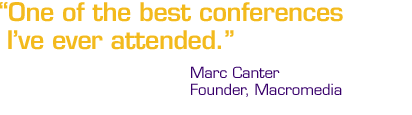
<style>
.page{position:relative;width:412px;height:115px;background:#ffffff}
.page>*{position:absolute;margin:0}
.t1{font:25px/28px "Eurostile-Demi";letter-spacing:-0.02em;color:#f3ba1d}
.t2{font:15px/17px "Eurostile";letter-spacing:-0.01em;color:#38006b}
</style>
<div class="page">
<p class="t1" style="left:0px;top:2px;width:343px;height:48px">“One of the best conferences<br> I’ve ever attended.”</p>
<p class="t2" style="left:191px;top:66px;width:151px;height:31px">Marc Canter<br>Founder, Macromedia</p>
</div>
